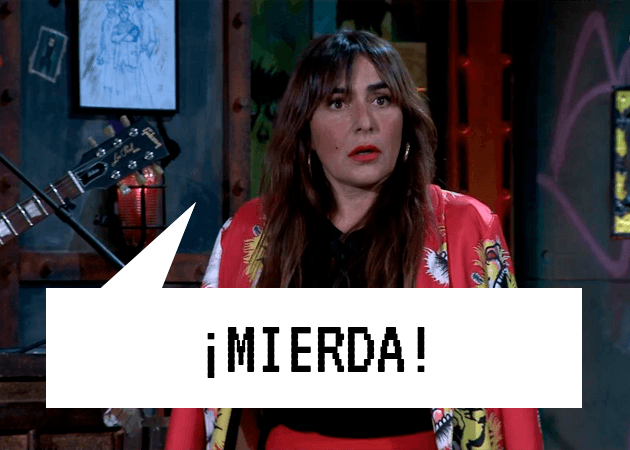
<style>
.page{position:relative;width:630px;height:450px;background:#ffffff}
.page>*{position:absolute;margin:0}
.t1{font:80px "VT323-Regular";letter-spacing:-0.025em;color:#000000}
</style>
<div class="page">
<p class="t1" style="left:207px;top:327px;width:218px;height:51px">¡MIERDA!</p>
</div>
